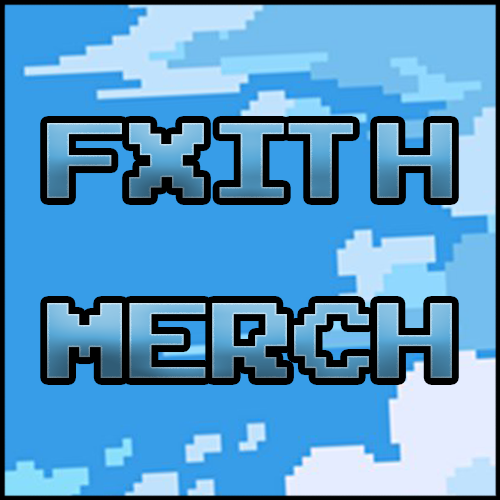
<style>
.page{position:relative;width:500px;height:500px;background:#379de8}
.page>*{position:absolute;margin:0}
.t1{font:150px "ArcadeClassic"}
</style>
<div class="page">
<p class="t1" style="left:47px;top:123px;width:405px;height:255px">FxiTh<br>merch</p>
</div>
